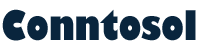
<style>
.page{position:relative;width:200px;height:48px;background:#ffffff}
.page>*{position:absolute;margin:0}
.t1{font:40px "GillSans-UltraBold";color:#09253d;scale:0.8 1}
</style>
<div class="page">
<p class="t1" style="left:2px;top:9px;width:194px;height:32px">Conntosol</p>
</div>
